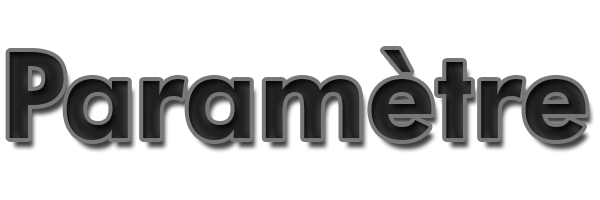
<style>
.page{position:relative;width:600px;height:200px;background:#ffffff}
.page>*{position:absolute;margin:0}
.t1{font:120px "FuturaBT-Heavy";color:#212121}
</style>
<div class="page">
<p class="t1" style="left:9px;top:50px;width:577px;height:90px">Paramètre</p>
</div>
